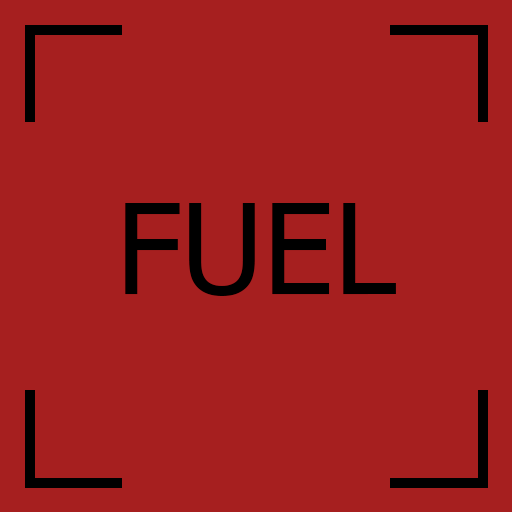
<style>
.page{position:relative;width:512px;height:512px;background:#a61f1f}
.page>*{position:absolute;margin:0}
.t1{font:125px "Tahoma";color:#000000}
</style>
<div class="page">
<p class="t1" style="left:125px;top:203px;width:271px;height:93px">FUEL</p>
</div>
